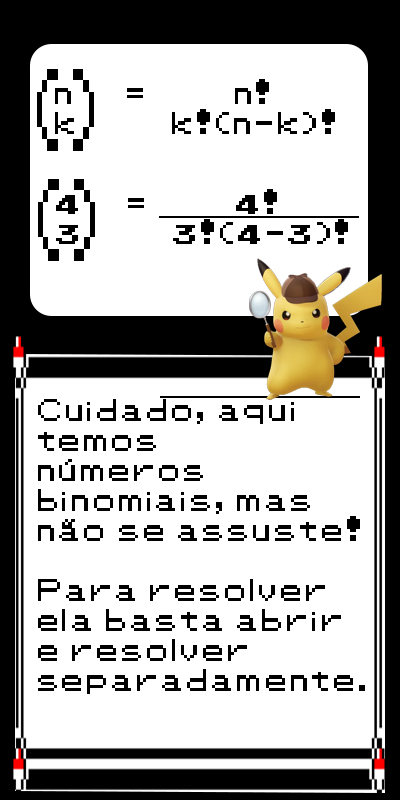
<style>
.page{position:relative;width:400px;height:800px;background:#ffffff}
.page>*{position:absolute;margin:0}
.t1{font:94.2px "Pokemon-Classic";color:#000000;scale:0.44 1}
.t2{font:25px "Pokemon-Classic";color:#000000}
</style>
<div class="page">
<p class="t1" style="left:37px;top:69px;width:57px;height:82px">( )</p>
<p class="t2" style="left:55px;top:79px;width:280px;height:55px">n  =    n!<br>k    k!(n-k)!</p>
<p class="t1" style="left:38px;top:179px;width:57px;height:82px">( )</p>
<p class="t2" style="left:56px;top:189px;width:292px;height:55px">4  =    4!<br>3    3!(4-3)!</p>
<p class="t2" style="left:38px;top:399px;width:327px;height:295px">Cuidado, aqui <br>temos <br>números <br>binomiais, mas <br>não se assuste!<br><br>Para resolver <br>ela basta abrir <br>e resolver <br>separadamente.</p>
</div>
